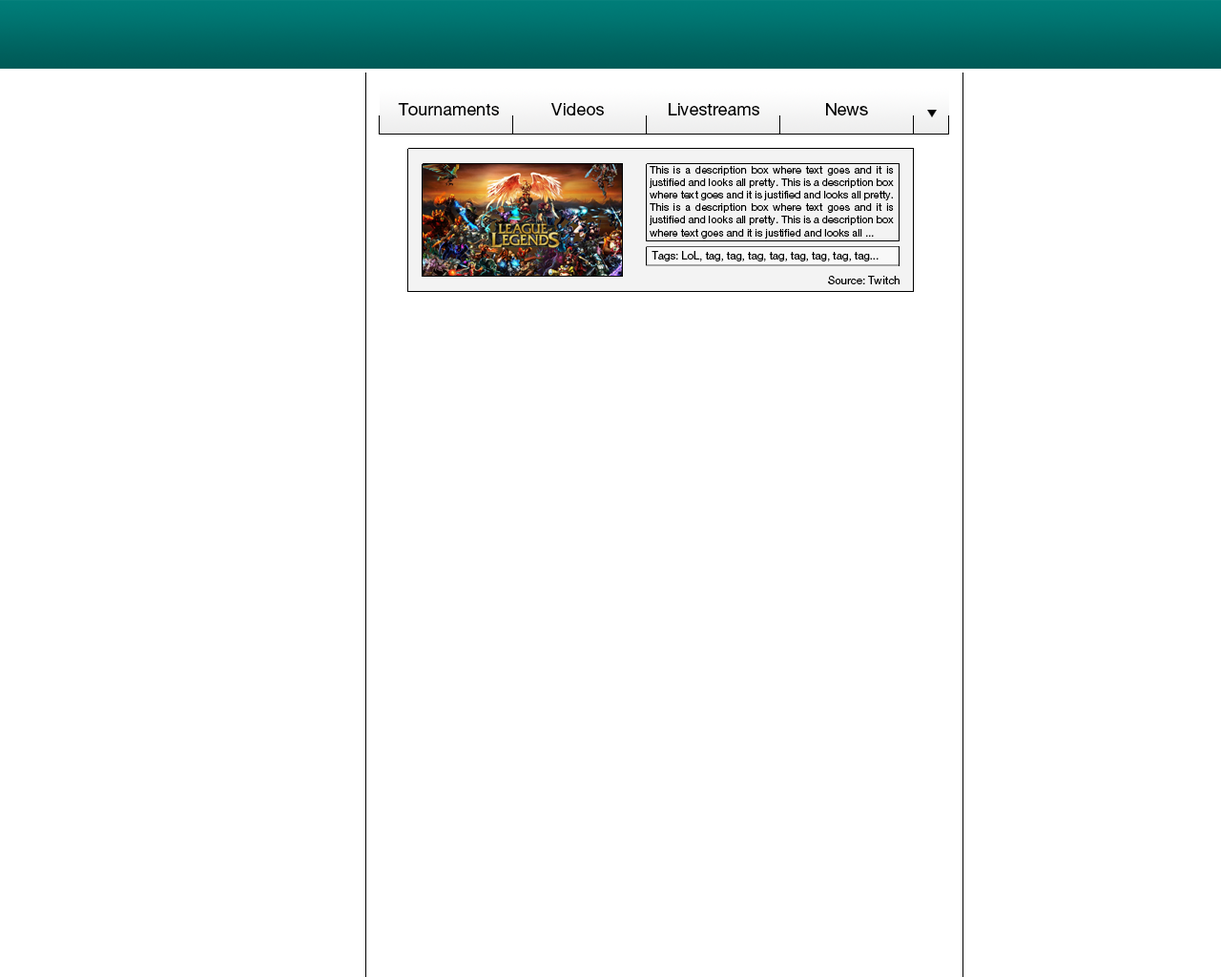
<style>
.page{position:relative;width:1221px;height:977px;background:#ffffff}
.page>*{position:absolute;margin:0}
.t1{font:17.2px "HelveticaNeueLTPro-Roman";color:#000000}
.t2{font:10.5px "HelveticaNeueLTPro-Roman";color:#000000}
.t3{font:10.7px "HelveticaNeueLTPro-Roman";color:#000000}
</style>
<div class="page">
<p class="t1" style="left:398px;top:103px;width:101px;height:12px">Tournaments</p>
<p class="t1" style="left:551px;top:103px;width:53px;height:12px">Videos</p>
<p class="t1" style="left:669px;top:103px;width:90px;height:12px">Livestreams</p>
<p class="t1" style="left:826px;top:103px;width:42px;height:12px">News</p>
<p class="t2" style="left:650px;top:166px;width:244px;height:72px;text-align:justify">This is a description box where text goes and it is justified and looks all pretty. This is a description box where text goes and it is justified and looks all pretty. This is a description box where text goes and it is justified and looks all pretty. This is a description box where text goes and it is justified and looks all ...</p>
<p class="t3" style="left:651px;top:251px;width:227px;height:10px">Tags: LoL, tag, tag, tag, tag, tag, tag, tag, tag...</p>
<p class="t3" style="left:828px;top:276px;width:71px;height:8px">Source: Twitch</p>
</div>
